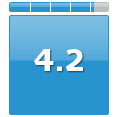
<style>
.page{position:relative;width:117px;height:117px;background:#2793cf}
.page>*{position:absolute;margin:0}
.t1{font:36px "Colaborate-Bold";color:#ffffff;text-transform:uppercase}
</style>
<div class="page">
<p class="t1" style="left:34px;top:49px;width:49px;height:22px">4.2</p>
</div>
